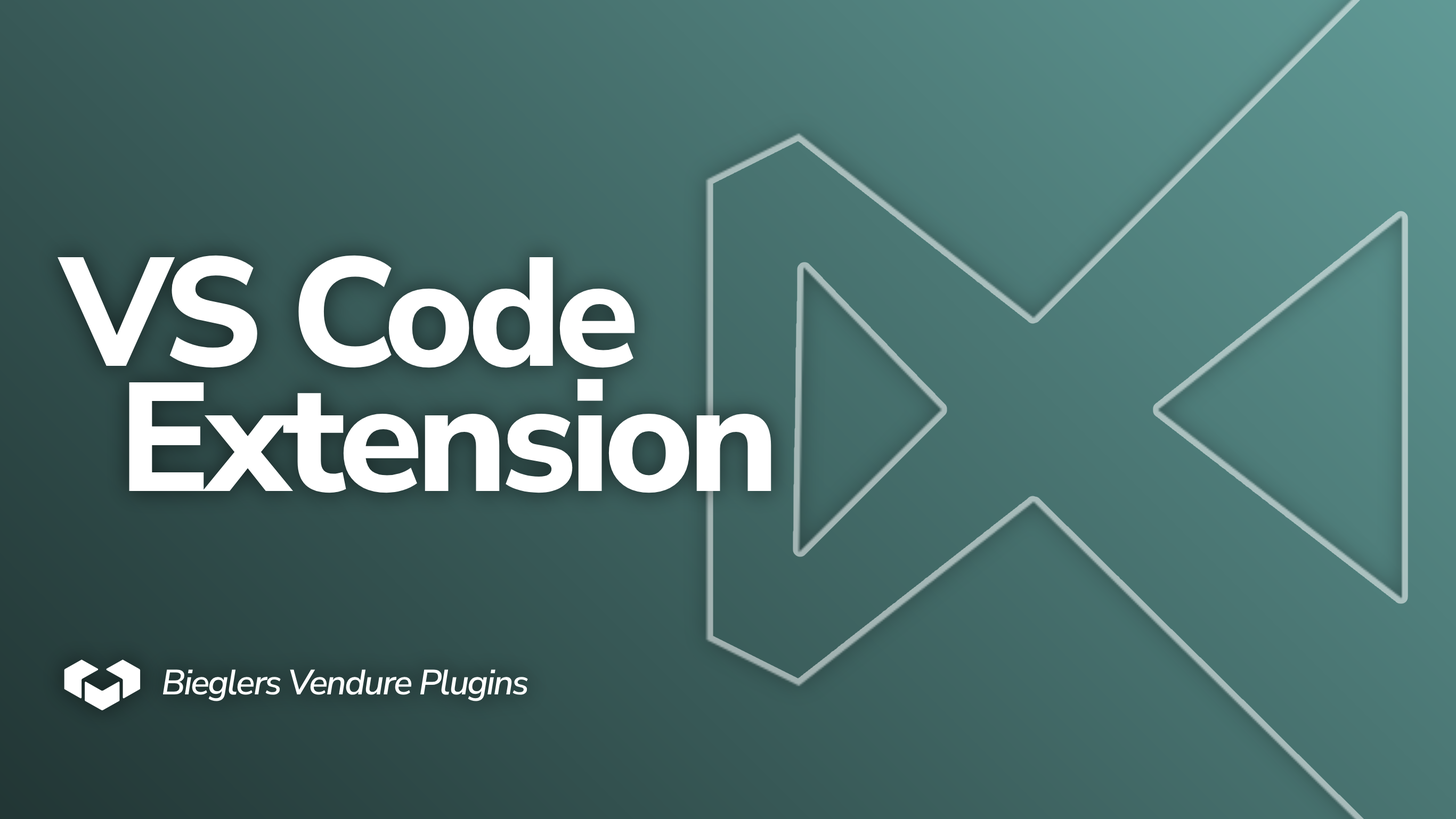
<style>
.page{position:relative;width:1456px;height:819px}
.page>*{position:absolute;margin:0}
.t1{font:154.1px/125.2px "NunitoSans-ExtraBold";letter-spacing:-0.045em;color:#ffffff}
.t2{font:35.2px "NunitoSans-SemiBoldItalic";letter-spacing:-0.045em;color:#ffffff}
</style>
<div class="page">
<p class="t1" style="left:58px;top:255px;width:713px;height:238px">VS Code<br>   Extension</p>
<p class="t2" style="left:162px;top:670px;width:366px;height:31px">Bieglers Vendure Plugins</p>
</div>
